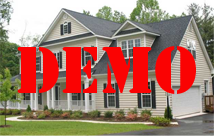
<style>
.page{position:relative;width:214px;height:136px}
.page>*{position:absolute;margin:0}
.t1{font:61px "StencilStd";color:#fa0303}
</style>
<div class="page">
<p class="t1" style="left:17px;top:46px;width:179px;height:48px">DEMO</p>
</div>
